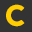
<style>
.page{position:relative;width:32px;height:32px;background:#333333}
.page>*{position:absolute;margin:0}
.t1{font:30px "BrandonGrotesque-Black";color:#ffcc00}
</style>
<div class="page">
<p class="t1" style="left:6px;top:4px;width:19px;height:23px">C</p>
</div>
